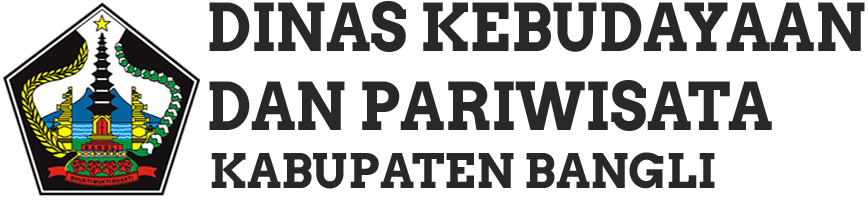
<style>
.page{position:relative;width:868px;height:200px;background:#ffffff}
.page>*{position:absolute;margin:0}
.t1{font:65.5px "Arvo-Bold";color:#282828;scale:0.93 1}
.t2{font:47.3px "Arvo-Bold";color:#282828}
</style>
<div class="page">
<p class="t1" style="left:209px;top:1px;width:656px;height:130px">DINAS KEBUDAYAAN <br>DAN PARIWISATA</p>
<p class="t2" style="left:211px;top:152px;width:504px;height:37px">KABUPATEN BANGLI</p>
</div>
